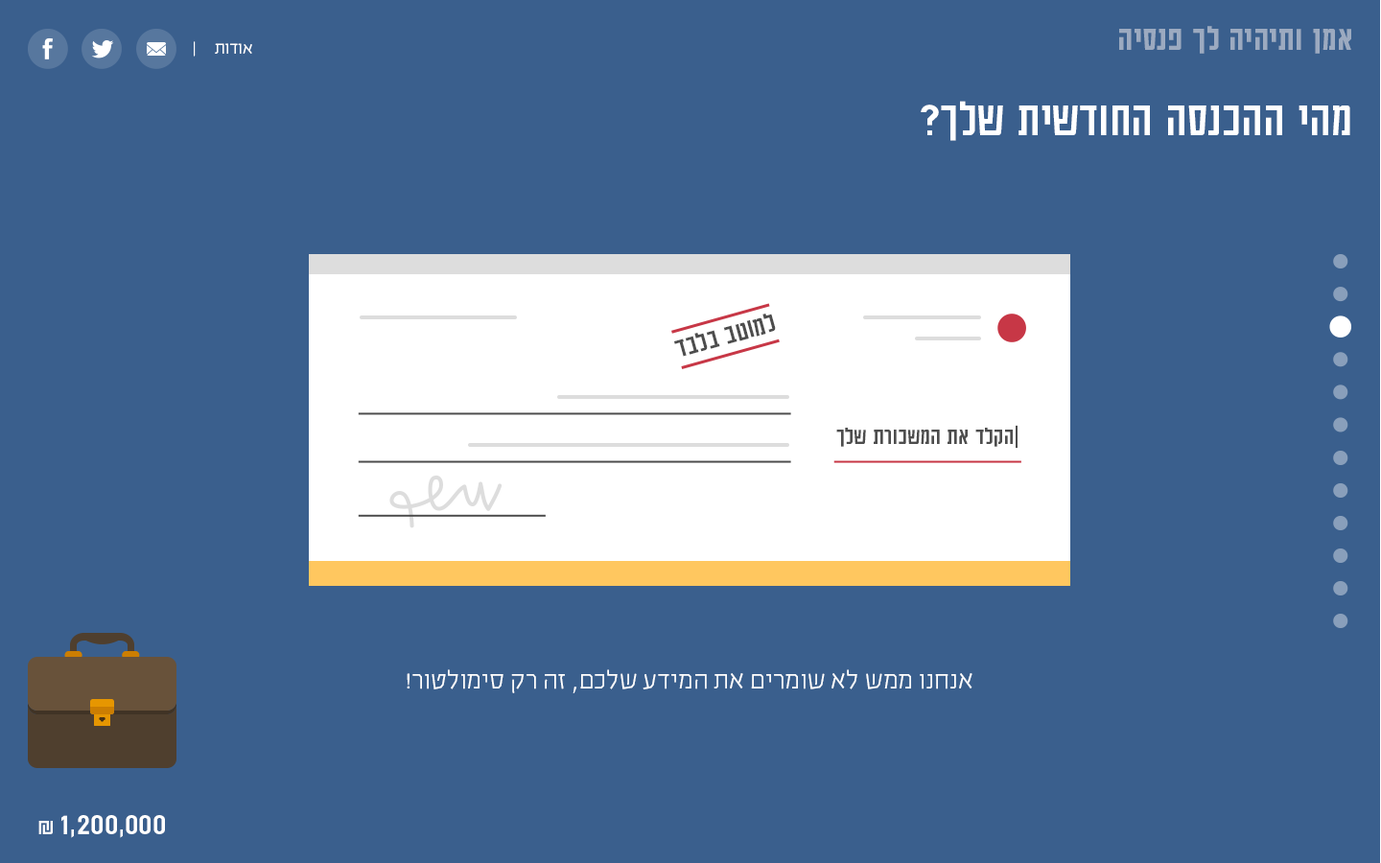
<style>
.page{position:relative;width:1381px;height:863px;background:#3a5f8d}
.page>*{position:absolute;margin:0}
.t1{font:37.8px "AdumaFOT-Medium";color:#9caac0}
.t2{font:19.2px "EzerBlock_OE-Light";color:#ffffff}
.t3{font:53.8px "AdumaFOT-Regular";color:#ffffff}
.t4{font:30.3px "AdumaFOT-Regular";color:#4d4d4d}
.t5{font:25.9px "AdumaFOT-Regular";color:#4d4d4d}
.t6{font:25.9px "AdumaFOT-Light";color:#4d4d4d}
.t7{font:28.8px "EzerBlock_OE-Light";color:#ffffff}
.t8{font:33.6px "AdumaFOT-Regular";color:#ffffff}
.t9{font:24px "AdumaFOT-Regular";color:#ffffff}
</style>
<div class="page">
<p class="t1" style="left:1119px;top:26px;width:233px;height:28px">אמן ותיהיה לך פנסיה</p>
<p class="t2" style="left:194px;top:41px;width:58px;height:16px">אודות     |</p>
<p class="t3" style="left:921px;top:101px;width:430px;height:40px">מהי ההכנסה החודשית שלך?</p>
<p class="t4" style="left:674px;top:314px;width:102px;height:43px">למוטב בלבד</p>
<p class="t5" style="left:836px;top:425px;width:182px;height:24px">הקלד את המשכורת שלך<span class="t6">|</span></p>
<p class="t7" style="left:407px;top:670px;width:566px;height:24px">אנחנו ממש לא שומרים את המידע שלכם, זה רק סימולטור!</p>
<p class="t8" style="left:38px;top:815px;width:127px;height:23px">1,200,000<span class="t9"> ₪</span></p>
</div>
